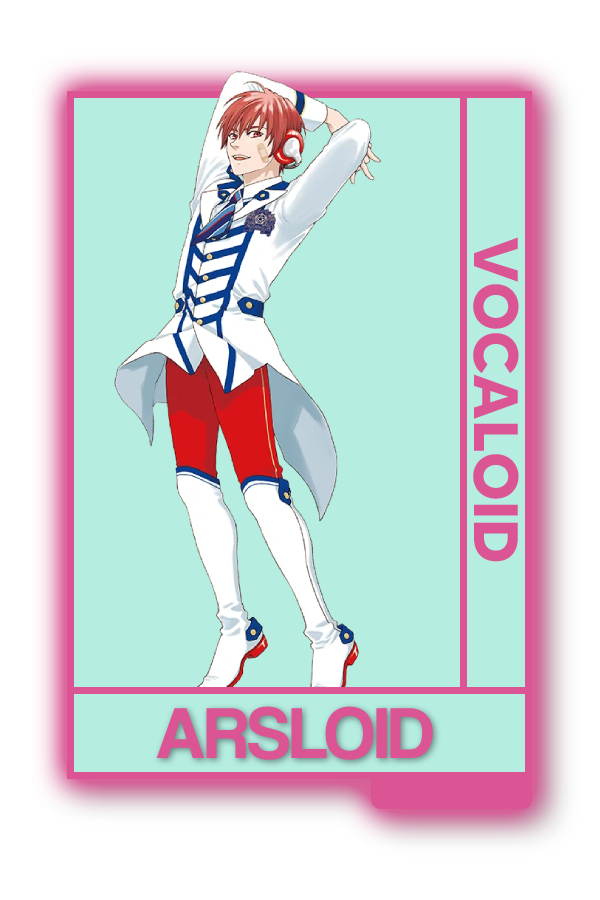
<style>
.page{position:relative;width:600px;height:900px;background:#b5ede1}
.page>*{position:absolute;margin:0}
.t1{font:62.5px "MADETOMMY-Bold";color:#db5493}
.t2{font:75px "CoolveticaRg-Regular";color:#db5493}
</style>
<div class="page">
<p class="t1" style="left:473px;top:237px;width:46px;height:325px;rotate:90deg">VOCALOID</p>
<p class="t2" style="left:156px;top:706px;width:277px;height:54px">ARSLOID</p>
</div>
